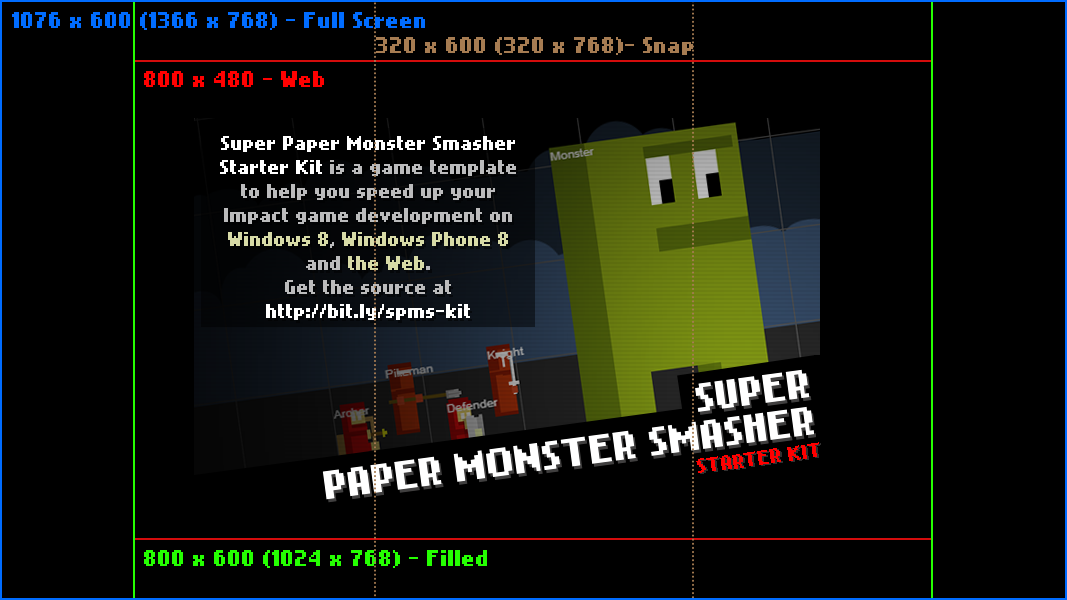
<style>
.page{position:relative;width:1067px;height:600px;background:#000000}
.page>*{position:absolute;margin:0}
.t1{font:18px "NokiaCellphoneFC-Small";color:#006cff}
.t2{font:18px "NokiaCellphoneFC-Small";color:#a67c52}
.t3{font:18px "NokiaCellphoneFC-Small";color:#ff0101}
.t4{font:16px/24px "NokiaCellphoneFC-Small";color:#bbbbbc}
.t5{font:16px/24px "NokiaCellphoneFC-Small";color:#ffffff}
.t6{font:16px/24px "NokiaCellphoneFC-Small";color:#d7daa6}
.t7{font:16px "NokiaCellphoneFC-Small";color:#ff0000}
.t8{font:18px "NokiaCellphoneFC-Small";color:#25ff01}
</style>
<div class="page">
<p class="t1" style="left:12px;top:12px;width:413px;height:18px">1076 x 600 (1366 x 768) - Full Screen</p>
<p class="t2" style="left:376px;top:37px;width:317px;height:18px">320 x 600 (320 x 768)- Snap</p>
<p class="t3" style="left:144px;top:71px;width:180px;height:16px">800 x 480 - Web</p>
<p class="t4" style="left:220px;top:136px;width:296px;height:184px;text-align:center"><span class="t5">Super Paper Monster Smasher Starter Kit </span>is a game template to help you speed up your Impact game development on <span class="t6">Windows 8</span>, <span class="t6">Windows Phone 8</span> and <span class="t6">the Web</span>.<br>Get the source at<span class="t5"> http://bit.ly/spms-kit</span></p>
<p class="t7" style="left:696px;top:442px;width:123px;height:31px;rotate:-8deg">STARTER KIT</p>
<p class="t8" style="left:144px;top:550px;width:343px;height:18px">800 x 600 (1024 x 768) - Filled</p>
</div>
